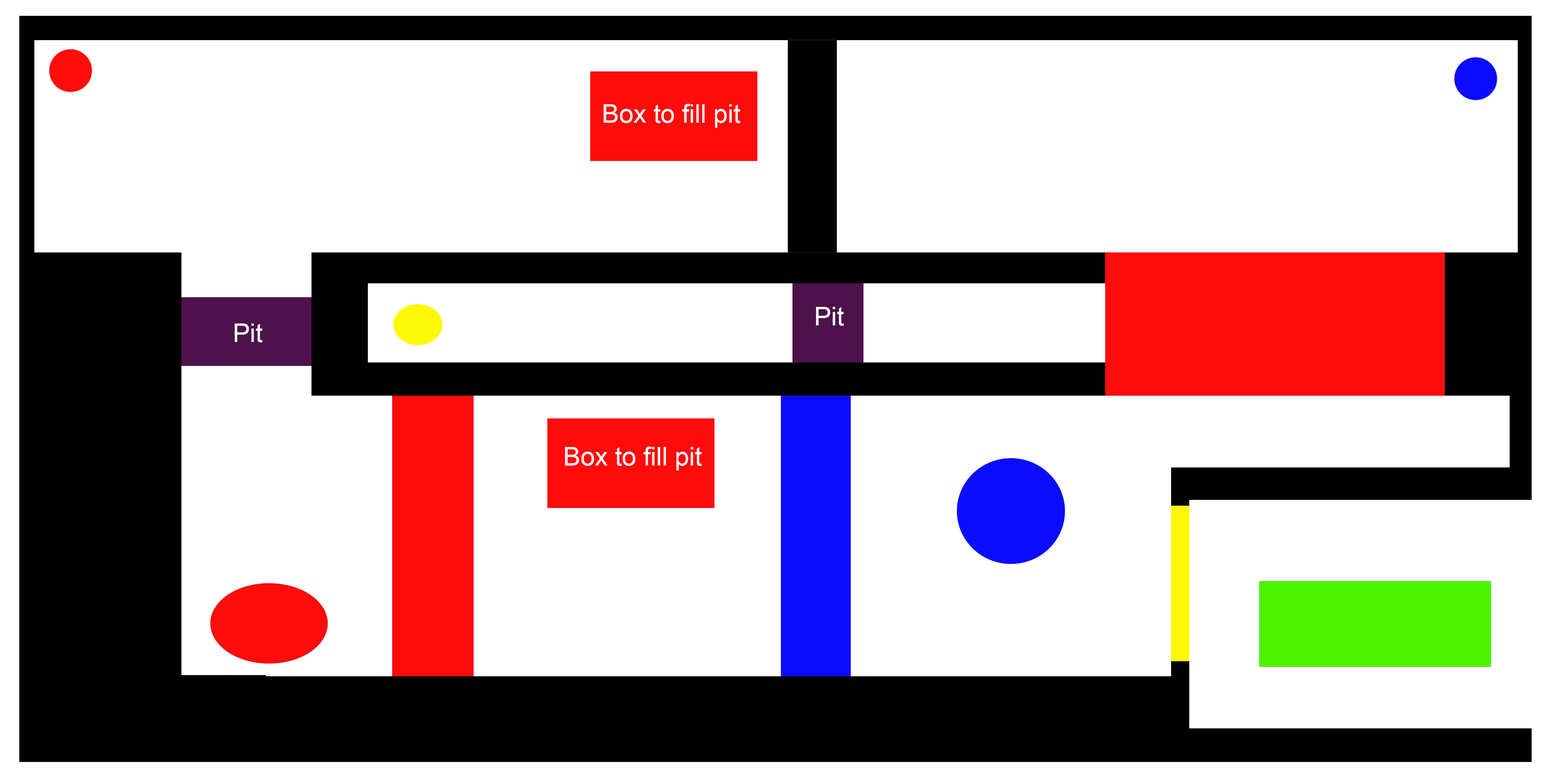
<style>
.page{position:relative;width:1544px;height:772px;background:#ffffff}
.page>*{position:absolute;margin:0}
.t1{font:25.7px "ArialMT";color:#ffffff}
</style>
<div class="page">
<p class="t1" style="left:603px;top:104px;width:137px;height:24px">Box to fill pit</p>
<p class="t1" style="left:816px;top:307px;width:28px;height:19px">Pit</p>
<p class="t1" style="left:235px;top:324px;width:28px;height:18px">Pit</p>
<p class="t1" style="left:565px;top:447px;width:137px;height:24px">Box to fill pit</p>
</div>
